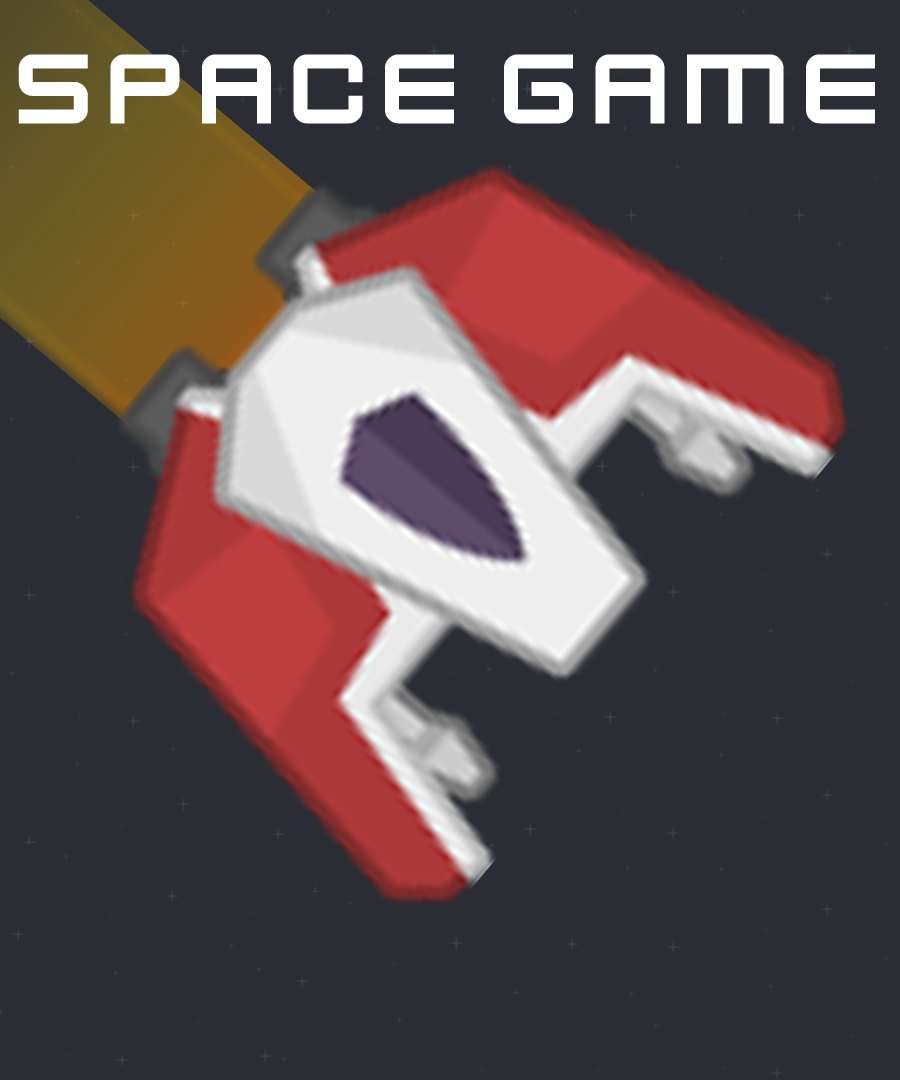
<style>
.page{position:relative;width:900px;height:1080px;background:#2a2d33}
.page>*{position:absolute;margin:0}
.t1{font:110px "KenVector-Future";color:#ffffff}
</style>
<div class="page">
<p class="t1" style="left:18px;top:54px;width:857px;height:70px">Space Game</p>
</div>
